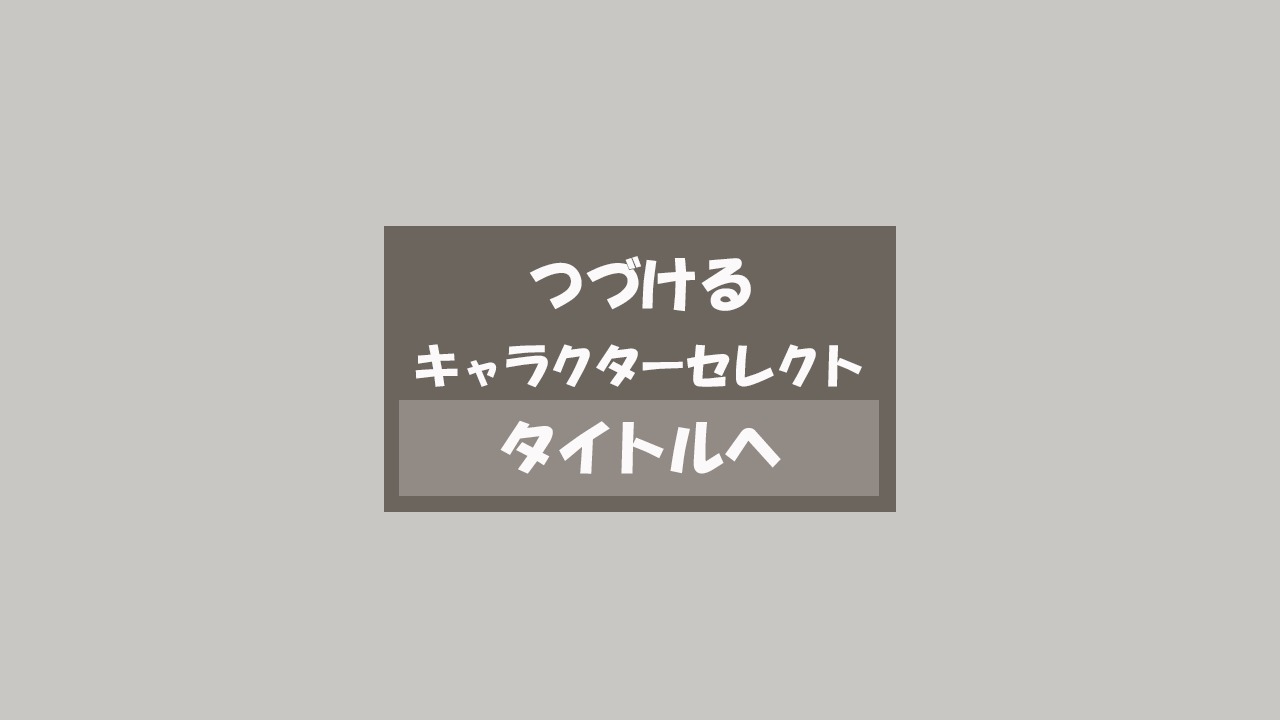
<style>
.page{position:relative;width:1280px;height:720px;background:#c9c7c4}
.page>*{position:absolute;margin:0}
.t1{font:60px "HGSoeiKakupoptai";letter-spacing:-0.06em;color:#fbf9f9}
.t2{font:48px "HGSoeiKakupoptai";letter-spacing:-0.06em;color:#fbf9f9}
</style>
<div class="page">
<p class="t1" style="left:529px;top:256px;width:222px;height:56px">つづける</p>
<p class="t2" style="left:415px;top:344px;width:447px;height:44px">キャラクターセレクト</p>
<p class="t1" style="left:500px;top:420px;width:281px;height:54px">タイトルヘ</p>
</div>
